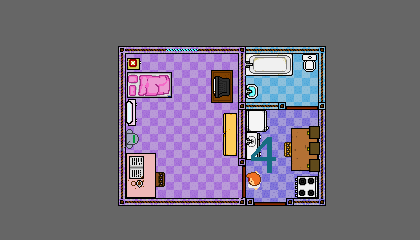
<style>
.page{position:relative;width:420px;height:240px;background:#666666}
.page>*{position:absolute;margin:0}
.t1{font:49.9px "Tahoma";color:#176d82}
</style>
<div class="page">
<p class="t1" style="left:251px;top:137px;width:25px;height:36px">4</p>
</div>
